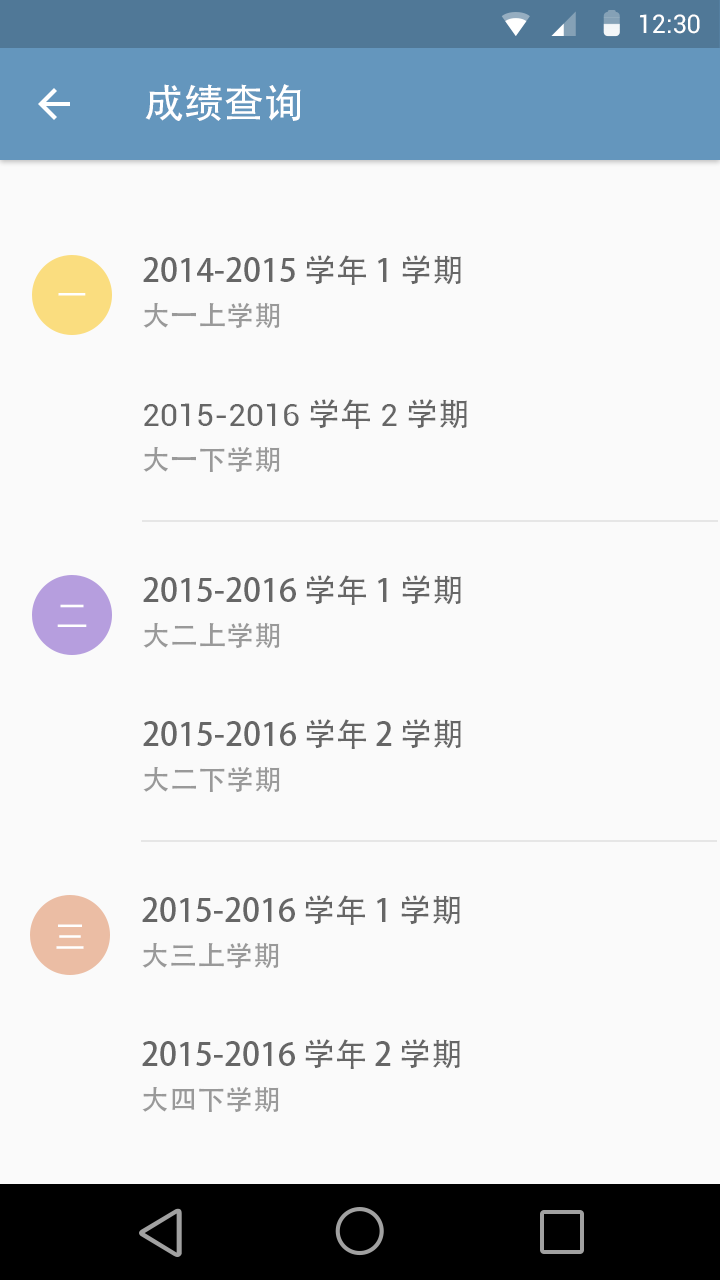
<style>
.page{position:relative;width:720px;height:1280px;background:#fafafa}
.page>*{position:absolute;margin:0}
.t1{font:25.4px "Roboto-Regular";color:#ffffff}
.t2{font:40px "AdobeHeitiStd-Regular";color:#ffffff}
.t3{font:32px "AdobeHeitiStd-Regular";color:#666666}
.t4{font:32px "DroidSansFallback";color:#ffffff}
.t5{font:28px "AdobeHeitiStd-Regular";color:#999999}
.t6{font:32px "Roboto-Regular";color:#666666}
</style>
<div class="page">
<p class="t1" style="left:640px;top:14px;width:60px;height:20px">12:30</p>
<p class="t2" style="left:145px;top:84px;width:156px;height:37px">成绩查询</p>
<p class="t3" style="left:143px;top:255px;width:318px;height:30px">2014-2015 学年 1 学期</p>
<p class="t4" style="left:58px;top:293px;width:28px;height:3px">一</p>
<p class="t5" style="left:143px;top:303px;width:137px;height:26px">大一上学期</p>
<p class="t6" style="left:144px;top:399px;width:323px;height:30px">2015-2016 <span class="t3">学年 </span>2 <span class="t3">学期</span></p>
<p class="t5" style="left:143px;top:447px;width:137px;height:26px">大一下学期</p>
<p class="t3" style="left:143px;top:575px;width:318px;height:30px">2015-2016 学年 1 学期</p>
<p class="t4" style="left:57px;top:604px;width:30px;height:23px">二</p>
<p class="t5" style="left:143px;top:623px;width:137px;height:26px">大二上学期</p>
<p class="t3" style="left:143px;top:719px;width:318px;height:30px">2015-2016 学年 2 学期</p>
<p class="t5" style="left:143px;top:767px;width:137px;height:26px">大二下学期</p>
<p class="t3" style="left:142px;top:895px;width:318px;height:30px">2015-2016 学年 1 学期</p>
<p class="t4" style="left:56px;top:924px;width:28px;height:25px">三</p>
<p class="t5" style="left:142px;top:943px;width:137px;height:26px">大三上学期</p>
<p class="t3" style="left:142px;top:1039px;width:318px;height:30px">2015-2016 学年 2 学期</p>
<p class="t5" style="left:142px;top:1087px;width:137px;height:26px">大四下学期</p>
</div>
